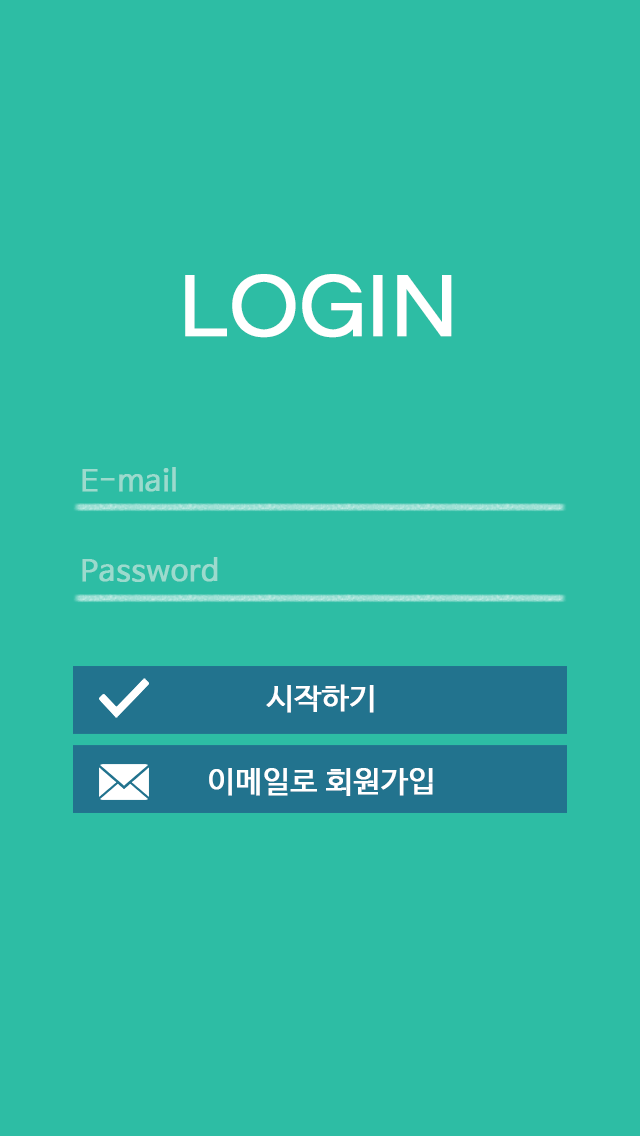
<style>
.page{position:relative;width:640px;height:1136px;background:#2dbda4}
.page>*{position:absolute;margin:0}
.t1{font:90px "Questrial-Regular";color:#ffffff;font-weight:bold}
.t2{font:30px "NanumBarunGothic";color:#9cdacd;font-weight:bold}
.t3{font:30px "NanumBarunGothic";color:#ffffff;font-weight:bold}
</style>
<div class="page">
<p class="t1" style="left:185px;top:274px;width:267px;height:64px">LOGIN</p>
<p class="t2" style="left:82px;top:467px;width:94px;height:25px">E-mail</p>
<p class="t2" style="left:82px;top:557px;width:136px;height:25px">Password</p>
<p class="t3" style="left:266px;top:684px;width:108px;height:29px">시작하기</p>
<p class="t3" style="left:209px;top:768px;width:224px;height:28px">이메일로 회원가입</p>
</div>
